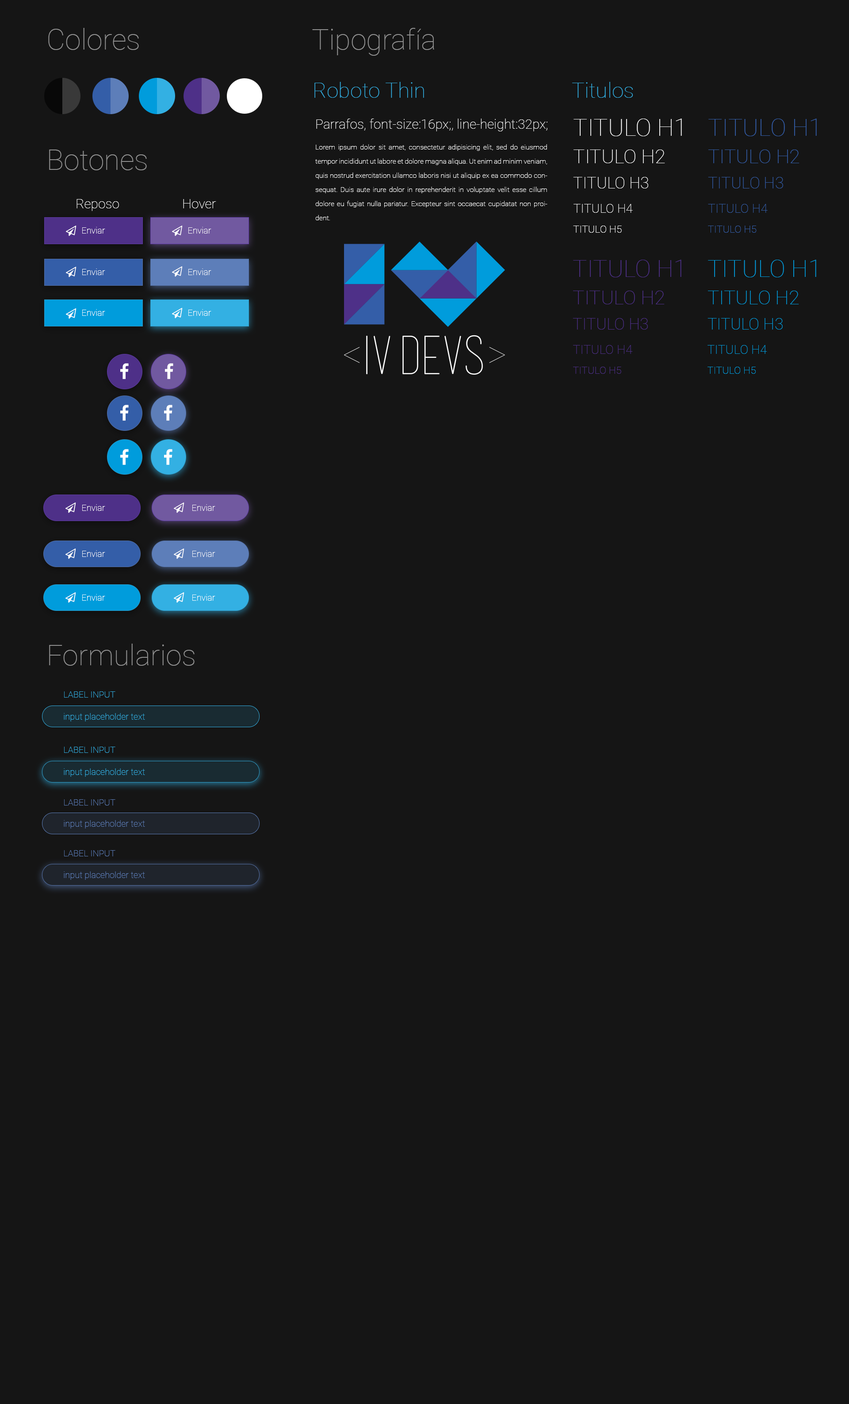
<style>
.page{position:relative;width:849px;height:1404px;background:#151515}
.page>*{position:absolute;margin:0}
.t1{font:28.7px "Roboto-Thin";color:#919191}
.t2{font:21.4px "Roboto-Thin";color:#33b0e3}
.t3{font:13.2px "Roboto-Thin";color:#ffffff}
.t4{font:24px "Roboto-Thin";color:#ffffff}
.t5{font:24px "Roboto-Thin";color:#345ea8}
.t6{font:7.1px/14.2px "Roboto-Thin";color:#ffffff}
.t7{font:19.5px "Roboto-Thin";color:#ffffff}
.t8{font:19.5px "Roboto-Thin";color:#345ea8}
.t9{font:16px "Roboto-Thin";color:#ffffff}
.t10{font:16px "Roboto-Thin";color:#345ea8}
.t11{font:12.6px "Roboto-Thin";color:#ffffff}
.t12{font:12.6px "Roboto-Thin";color:#345ea8}
.t13{font:8.8px "Roboto-Thin";color:#ffffff}
.t14{font:10.3px "Roboto-Thin";color:#ffffff}
.t15{font:10.3px "Roboto-Thin";color:#345ea8}
.t16{font:24px "Roboto-Thin";color:#4e3088}
.t17{font:24px "Roboto-Thin";color:#009cdc}
.t18{font:19.5px "Roboto-Thin";color:#4e3088}
.t19{font:19.5px "Roboto-Thin";color:#009cdc}
.t20{font:16px "Roboto-Thin";color:#4e3088}
.t21{font:16px "Roboto-Thin";color:#009cdc}
.t22{font:12.6px "Roboto-Thin";color:#4e3088}
.t23{font:12.6px "Roboto-Thin";color:#009cdc}
.t24{font:10.3px "Roboto-Thin";color:#4e3088}
.t25{font:10.3px "Roboto-Thin";color:#009cdc}
.t26{font:8.8px "Roboto-Thin";color:#33b0e3;text-transform:uppercase}
.t27{font:8.8px "Roboto-Thin";color:#33b0e3}
.t28{font:8.8px "Roboto-Thin";color:#5d7eb9;text-transform:uppercase}
.t29{font:8.8px "Roboto-Thin";color:#5d7eb9}
</style>
<div class="page">
<p class="t1" style="left:48px;top:28px;width:91px;height:22px">Colores</p>
<p class="t1" style="left:312px;top:28px;width:122px;height:28px">Tipografía</p>
<p class="t2" style="left:315px;top:82px;width:109px;height:16px">Roboto Thin</p>
<p class="t2" style="left:572px;top:82px;width:61px;height:16px">Titulos</p>
<p class="t3" style="left:316px;top:119px;width:232px;height:12px">Parrafos, font-size:16px;, line-height:32px;</p>
<p class="t4" style="left:574px;top:119px;width:108px;height:17px">TITULO H1</p>
<p class="t5" style="left:709px;top:119px;width:108px;height:17px">TITULO H1</p>
<p class="t1" style="left:49px;top:150px;width:98px;height:20px">Botones</p>
<p class="t6" style="left:315px;top:144px;width:233px;height:76px;text-align:justify">Lorem ipsum dolor sit amet, consectetur adipisicing elit, sed do eiusmod tempor incididunt ut labore et dolore magna aliqua. Ut enim ad minim veniam, quis nostrud exercitation ullamco laboris nisi ut aliquip ex ea commodo consequat. Duis aute irure dolor in reprehenderit in voluptate velit esse cillum dolore eu fugiat nulla pariatur. Excepteur sint occaecat cupidatat non proident.</p>
<p class="t7" style="left:574px;top:150px;width:91px;height:13px">TITULO H2</p>
<p class="t8" style="left:709px;top:150px;width:91px;height:13px">TITULO H2</p>
<p class="t9" style="left:573px;top:177px;width:75px;height:11px">TITULO H3</p>
<p class="t10" style="left:708px;top:177px;width:75px;height:11px">TITULO H3</p>
<p class="t3" style="left:77px;top:199px;width:42px;height:12px">Reposo</p>
<p class="t3" style="left:183px;top:199px;width:33px;height:9px">Hover</p>
<p class="t11" style="left:574px;top:204px;width:59px;height:9px">TITULO H4</p>
<p class="t12" style="left:708px;top:204px;width:60px;height:9px">TITULO H4</p>
<p class="t13" style="left:82px;top:227px;width:23px;height:7px">Enviar</p>
<p class="t13" style="left:188px;top:227px;width:23px;height:7px">Enviar</p>
<p class="t14" style="left:573px;top:226px;width:49px;height:7px">TITULO H5</p>
<p class="t15" style="left:708px;top:226px;width:49px;height:7px">TITULO H5</p>
<p class="t13" style="left:82px;top:269px;width:23px;height:6px">Enviar</p>
<p class="t13" style="left:188px;top:269px;width:23px;height:6px">Enviar</p>
<p class="t16" style="left:573px;top:260px;width:109px;height:17px">TITULO H1</p>
<p class="t17" style="left:708px;top:260px;width:109px;height:17px">TITULO H1</p>
<p class="t18" style="left:573px;top:291px;width:92px;height:13px">TITULO H2</p>
<p class="t19" style="left:708px;top:291px;width:91px;height:13px">TITULO H2</p>
<p class="t13" style="left:82px;top:309px;width:23px;height:7px">Enviar</p>
<p class="t13" style="left:188px;top:309px;width:23px;height:7px">Enviar</p>
<p class="t20" style="left:573px;top:318px;width:75px;height:12px">TITULO H3</p>
<p class="t21" style="left:708px;top:318px;width:75px;height:12px">TITULO H3</p>
<p class="t22" style="left:573px;top:345px;width:60px;height:9px">TITULO H4</p>
<p class="t23" style="left:708px;top:345px;width:59px;height:9px">TITULO H4</p>
<p class="t24" style="left:573px;top:367px;width:48px;height:7px">TITULO H5</p>
<p class="t25" style="left:708px;top:367px;width:48px;height:7px">TITULO H5</p>
<p class="t13" style="left:82px;top:504px;width:23px;height:7px">Enviar</p>
<p class="t13" style="left:192px;top:504px;width:23px;height:7px">Enviar</p>
<p class="t13" style="left:82px;top:550px;width:23px;height:7px">Enviar</p>
<p class="t13" style="left:192px;top:550px;width:23px;height:7px">Enviar</p>
<p class="t13" style="left:82px;top:594px;width:23px;height:7px">Enviar</p>
<p class="t13" style="left:192px;top:594px;width:23px;height:7px">Enviar</p>
<p class="t1" style="left:49px;top:644px;width:146px;height:22px">Formularios</p>
<p class="t26" style="left:64px;top:691px;width:51px;height:7px">LABEL INPUT</p>
<p class="t27" style="left:64px;top:713px;width:81px;height:8px">input placeholder text</p>
<p class="t26" style="left:64px;top:747px;width:51px;height:6px">LABEL INPUT</p>
<p class="t27" style="left:64px;top:768px;width:81px;height:9px">input placeholder text</p>
<p class="t28" style="left:64px;top:799px;width:51px;height:7px">LABEL INPUT</p>
<p class="t29" style="left:64px;top:820px;width:81px;height:9px">input placeholder text</p>
<p class="t28" style="left:64px;top:850px;width:51px;height:6px">LABEL INPUT</p>
<p class="t29" style="left:64px;top:871px;width:81px;height:9px">input placeholder text</p>
</div>
